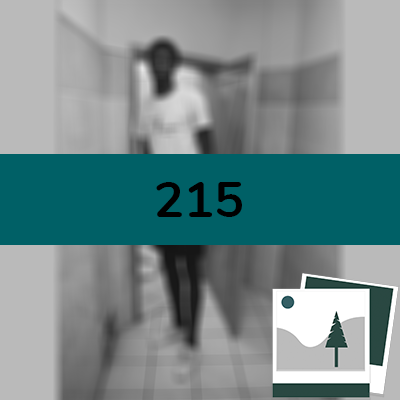
<style>
.page{position:relative;width:400px;height:400px;background:#006066}
.page>*{position:absolute;margin:0}
.t1{font:50px "Nunito-Bold";color:#000000}
</style>
<div class="page">
<p class="t1" style="left:156px;top:182px;width:86px;height:35px">215</p>
</div>
